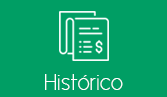
<style>
.page{position:relative;width:167px;height:97px;background:#009e64}
.page>*{position:absolute;margin:0}
.t1{font:22.7px "CicleFina";color:#ffffff}
</style>
<div class="page">
<p class="t1" style="left:45px;top:74px;width:78px;height:16px">Histórico</p>
</div>
